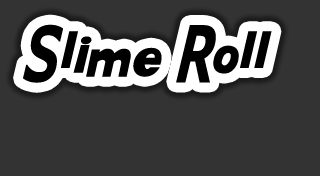
<style>
.page{position:relative;width:320px;height:176px;background:#333333}
.page>*{position:absolute;margin:0}
.t1{font:48px "KittyKatt";color:#000000}
</style>
<div class="page">
<p class="t1" style="left:23px;top:24px;width:249px;height:59px">Slime Roll</p>
</div>
